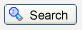
<style>
.page{position:relative;width:82px;height:30px;background:#f5f3ef}
.page>*{position:absolute;margin:0}
.t1{font:12px "ArialMT";color:#000000}
</style>
<div class="page">
<p class="t1" style="left:30px;top:10px;width:38px;height:10px">Search</p>
</div>
